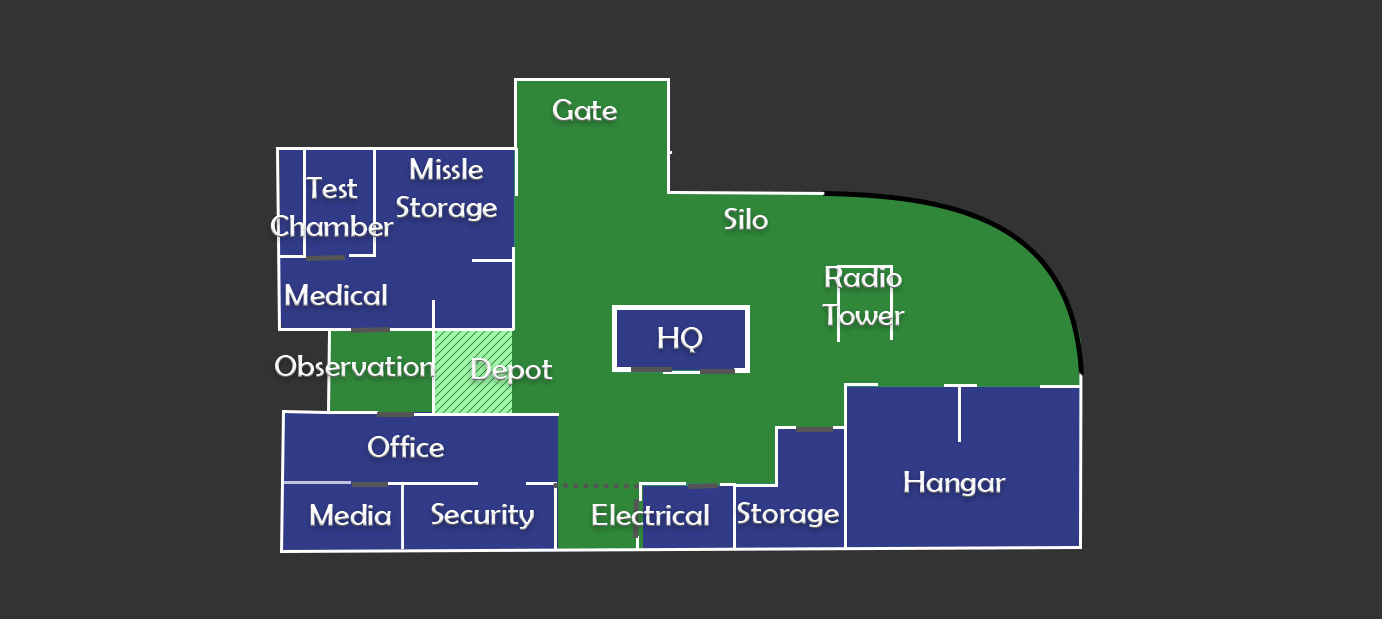
<style>
.page{position:relative;width:1382px;height:619px;background:#333333}
.page>*{position:absolute;margin:0}
.t1{font:32px "BerlinSansFB-Reg";color:#ffffff}
</style>
<div class="page">
<p class="t1" style="left:552px;top:99px;width:65px;height:22px">Gate</p>
<p class="t1" style="left:396px;top:158px;width:101px;height:64px;text-align:center">Missle<br>Storage</p>
<p class="t1" style="left:270px;top:177px;width:124px;height:60px;text-align:center">Test<br>Chamber</p>
<p class="t1" style="left:724px;top:208px;width:44px;height:22px">Silo</p>
<p class="t1" style="left:822px;top:266px;width:83px;height:60px;text-align:center">Radio<br>Tower</p>
<p class="t1" style="left:285px;top:284px;width:102px;height:22px">Medical</p>
<p class="t1" style="left:658px;top:327px;width:45px;height:26px">HQ</p>
<p class="t1" style="left:275px;top:355px;width:160px;height:22px">Observation</p>
<p class="t1" style="left:471px;top:358px;width:82px;height:27px">Depot</p>
<p class="t1" style="left:368px;top:435px;width:76px;height:23px">Office</p>
<p class="t1" style="left:904px;top:471px;width:102px;height:26px">Hangar</p>
<p class="t1" style="left:310px;top:504px;width:81px;height:22px">Media</p>
<p class="t1" style="left:431px;top:503px;width:103px;height:27px">Security</p>
<p class="t1" style="left:592px;top:504px;width:117px;height:22px">Electrical</p>
<p class="t1" style="left:737px;top:502px;width:102px;height:26px">Storage</p>
</div>
